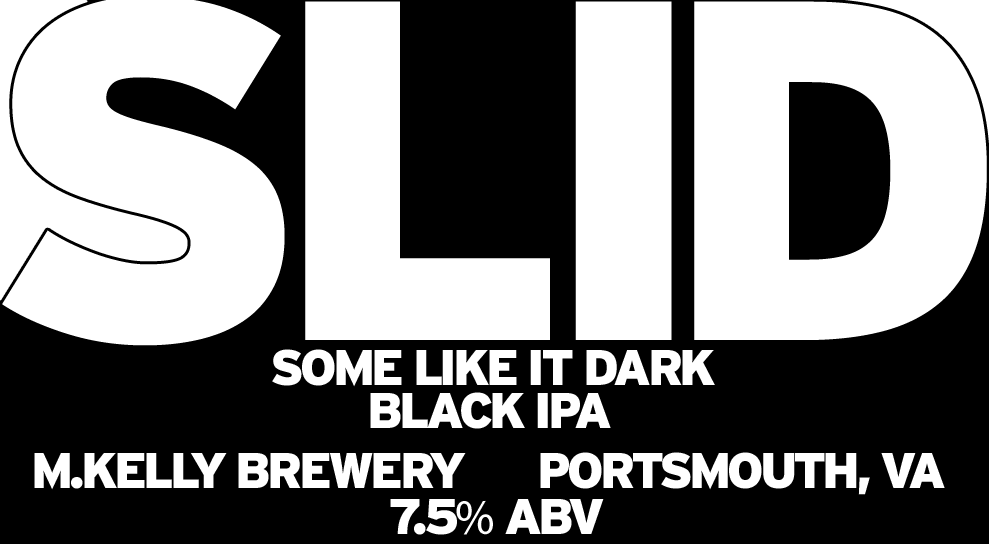
<style>
.page{position:relative;width:989px;height:544px;background:#000000}
.page>*{position:absolute;margin:0}
.t1{font:483.3px "Interstate-Black";letter-spacing:-0.1em;color:#ffffff}
.t2{font:483.3px "Interstate-Black";letter-spacing:-0.08em;color:#ffffff}
.t3{font:483.3px "Interstate-Black";letter-spacing:-0.06em;color:#ffffff}
.t4{font:50px "Interstate-Black";letter-spacing:-0.08em;color:#ffffff}
.t5{font:50px "MyriadPro-Regular";letter-spacing:-0.08em;color:#ffffff}
</style>
<div class="page">
<p class="t1" style="left:2px;top:0px;width:985px;height:346px"><span class="t2">S</span><span class="t3">L</span>ID</p>
<p class="t4" style="left:272px;top:349px;width:443px;height:38px">SOME LIKE IT DARK</p>
<p class="t4" style="left:370px;top:392px;width:241px;height:37px">BLACK IPA</p>
<p class="t4" style="left:34px;top:452px;width:911px;height:43px">M.KELLY BREWERY      PORTSMOUTH, VA</p>
<p class="t4" style="left:390px;top:499px;width:214px;height:36px">7.5<span class="t5">%</span> ABV</p>
</div>
